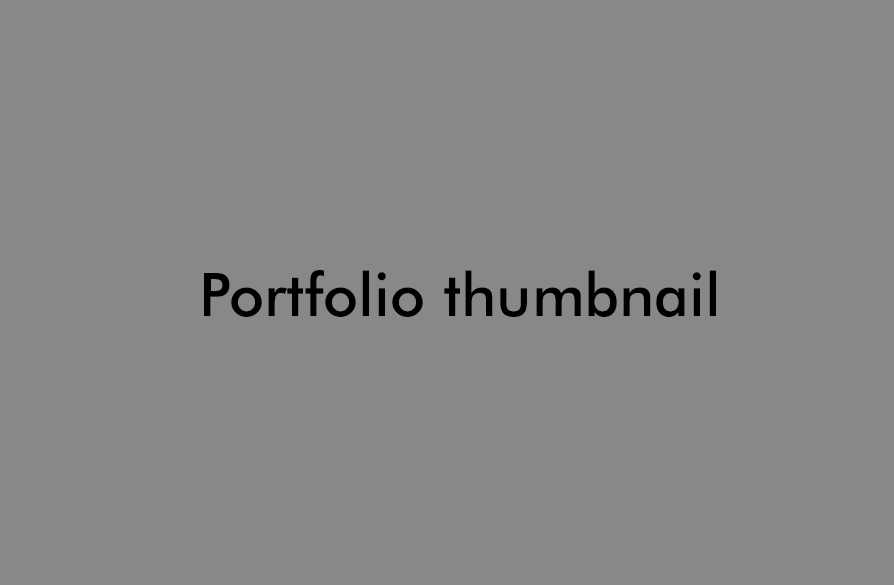
<style>
.page{position:relative;width:894px;height:585px;background:#888888}
.page>*{position:absolute;margin:0}
.t1{font:60px "FuturaBT-Medium";color:#000000}
</style>
<div class="page">
<p class="t1" style="left:204px;top:270px;width:512px;height:47px">Portfolio thumbnail</p>
</div>
